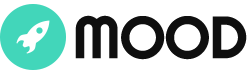
<style>
.page{position:relative;width:252px;height:74px;background:#ffffff}
.page>*{position:absolute;margin:0}
.t1{font:59.7px "Righteous-Regular";letter-spacing:-0.025em;color:#0f0f0f}
</style>
<div class="page">
<p class="t1" style="left:75px;top:15px;width:172px;height:45px">MOOD</p>
</div>
